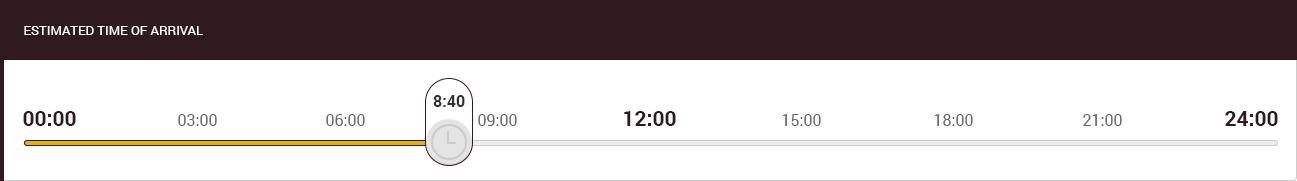
<style>
.page{position:relative;width:1297px;height:181px;background:#ffffff}
.page>*{position:absolute;margin:0}
.t1{font:13px "Roboto-Regular";color:#ffffff;text-transform:uppercase}
.t2{font:16px "Roboto-Bold";color:#333333}
.t3{font:21px "Roboto-Bold";color:#2f1b1f}
.t4{font:16px "Roboto-Regular";color:#666666}
</style>
<div class="page">
<p class="t1" style="left:24px;top:26px;width:179px;height:9px">Estimated Time of Arrival</p>
<p class="t2" style="left:433px;top:95px;width:32px;height:12px">8:40</p>
<p class="t3" style="left:23px;top:111px;width:53px;height:15px">00:00</p>
<p class="t3" style="left:624px;top:111px;width:52px;height:15px">12:00</p>
<p class="t3" style="left:1225px;top:111px;width:53px;height:15px">24:00</p>
<p class="t4" style="left:178px;top:114px;width:39px;height:12px">03:00</p>
<p class="t4" style="left:326px;top:114px;width:39px;height:12px">06:00</p>
<p class="t4" style="left:478px;top:114px;width:39px;height:12px">09:00</p>
<p class="t4" style="left:782px;top:114px;width:39px;height:12px">15:00</p>
<p class="t4" style="left:934px;top:114px;width:39px;height:12px">18:00</p>
<p class="t4" style="left:1083px;top:114px;width:39px;height:12px">21:00</p>
</div>
